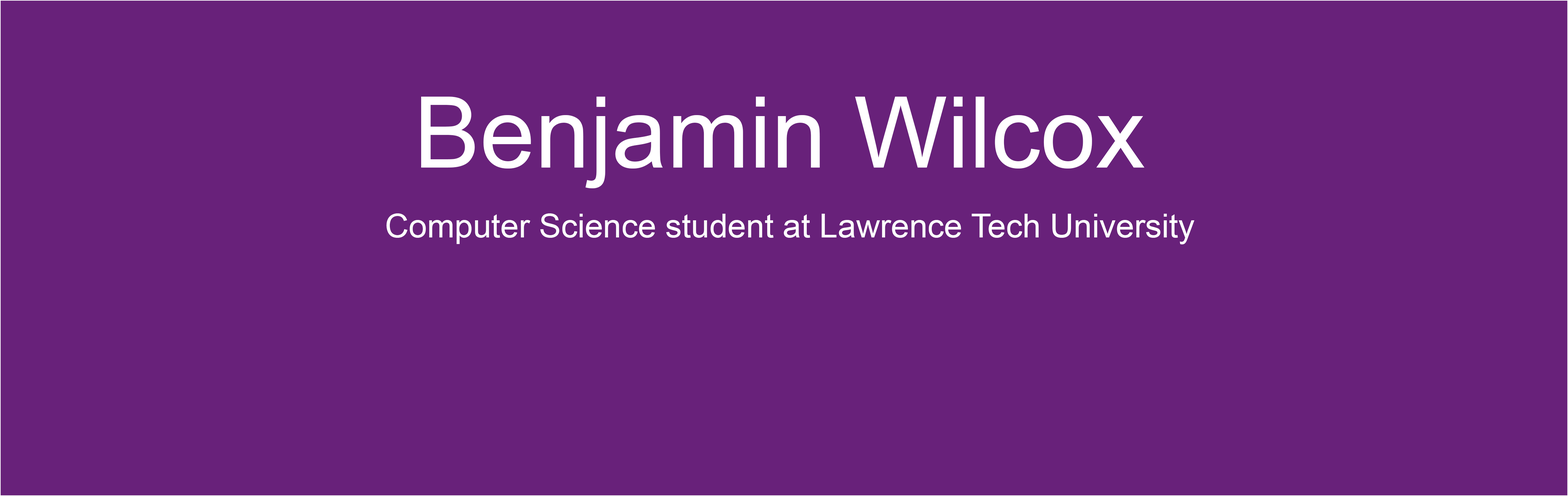
<style>
.page{position:relative;width:1568px;height:496px;background:#68217a}
.page>*{position:absolute;margin:0}
.t1{font:98.9px "ArialMT";color:#ffffff}
.t2{font:33px "ArialMT";color:#ffffff}
</style>
<div class="page">
<p class="t1" style="left:421px;top:97px;width:724px;height:91px">Benjamin Wilcox</p>
<p class="t2" style="left:386px;top:213px;width:808px;height:31px">Computer Science student at Lawrence Tech University</p>
</div>
